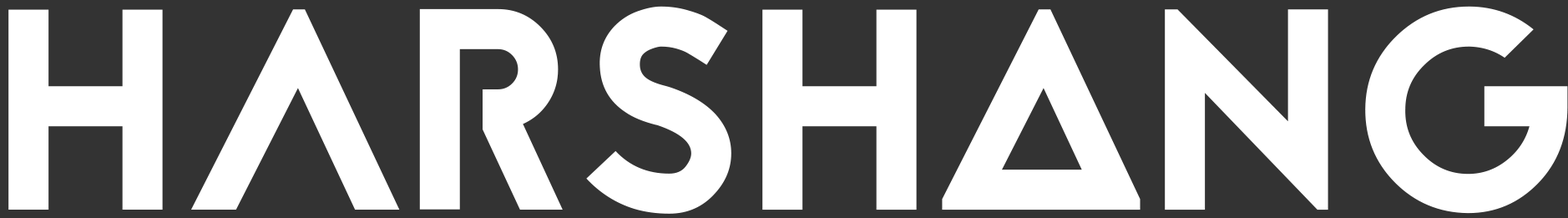
<style>
.page{position:relative;width:1568px;height:218px;background:#333333}
.page>*{position:absolute;margin:0}
.t1{font:285.8px "JaapokkienchanceRegular";color:#ffffff}
.t2{font:285.8px "JaapokkisubtractRegular";color:#ffffff}
</style>
<div class="page">
<p class="t1" style="left:8px;top:6px;width:1560px;height:208px">H<span class="t2">AR</span>SHAN<span class="t2">G</span></p>
</div>
